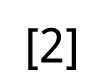
<style>
.page{position:relative;width:105px;height:83px;background:#ffffff}
.page>*{position:absolute;margin:0}
.t1{font:47.9px "DroidSans";color:#000000}
</style>
<div class="page">
<p class="t1" style="left:28px;top:27px;width:48px;height:43px">[2]</p>
</div>
